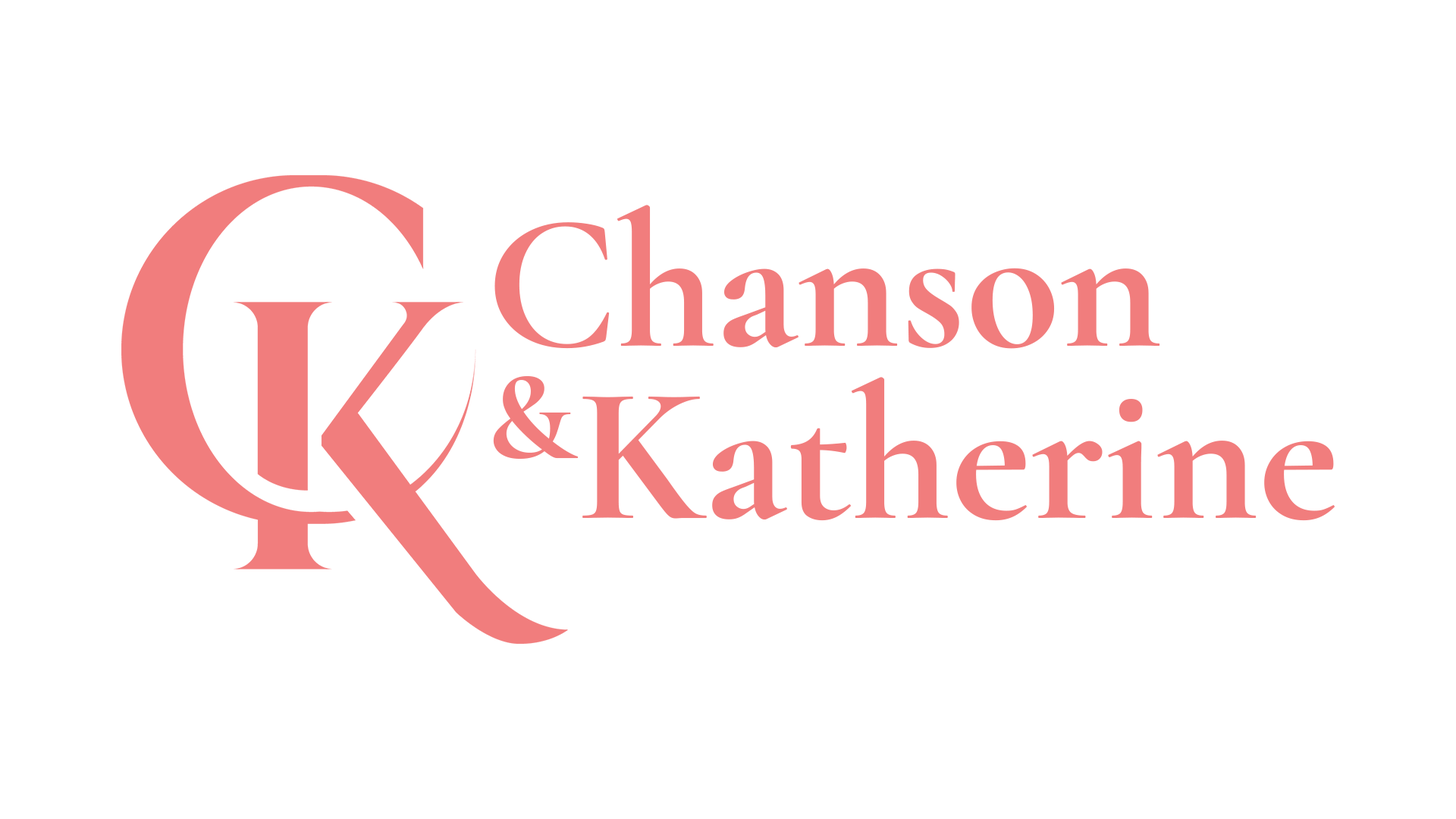
<style>
.page{position:relative;width:1456px;height:819px;background:#ffffff}
.page>*{position:absolute;margin:0}
.t1{font:194.2px "CormorantGaramond-Bold";color:#f17d7d}
.t2{font:127.1px "CormorantGaramond-Bold";color:#f17d7d}
</style>
<div class="page">
<p class="t1" style="left:494px;top:205px;width:666px;height:144px">Chanson</p>
<p class="t2" style="left:493px;top:376px;width:86px;height:83px">&amp;</p>
<p class="t1" style="left:582px;top:377px;width:753px;height:144px">Katherine</p>
</div>
